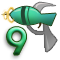
<style>
.page{position:relative;width:60px;height:60px;background:#ffffff}
.page>*{position:absolute;margin:0}
.t1{font:36.1px "BlippoLightSF";letter-spacing:0.07em;font-weight:bold}
</style>
<div class="page">
<p class="t1" style="left:7px;top:27px;width:19px;height:28px">9</p>
</div>
